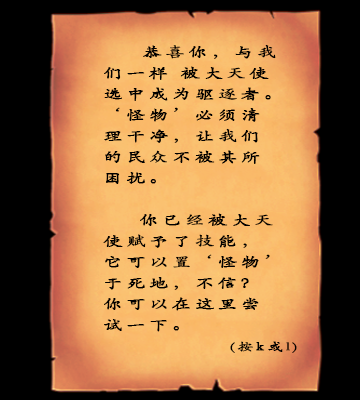
<style>
.page{position:relative;width:360px;height:400px;background:#000000}
.page>*{position:absolute;margin:0}
.t1{font:14px "STKaiti";letter-spacing:0.16em;color:#000000;font-weight:bold;scale:1.38 1}
.t2{font:11.7px "STKaiti";letter-spacing:0.16em;color:#000000;font-weight:bold;scale:1.38 1}
</style>
<div class="page">
<p class="t1" style="left:103px;top:44px;width:194px;height:309px">恭喜你，与我<br>们一样 被大天使<br>选中成为驱逐者。<br>‘怪物’必须清<br>理干净，让我们<br>的民众不被其所<br>困扰。<br><br> 你已经被大天<br>使赋予了技能，<br>它可以置‘怪物’<br>于死地，不信？<br>你可以在这里尝<br>试一下。<br>               <span class="t2">(按k或l)</span></p>
</div>
